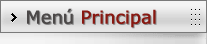
<style>
.page{position:relative;width:207px;height:44px}
.page>*{position:absolute;margin:0}
.t1{font:18px "Verdana";letter-spacing:-0.025em;color:#881811;font-weight:bold}
.t2{font:18px "Verdana";letter-spacing:-0.025em;color:#4b4848;font-weight:bold}
.t3{font:18px "Verdana";letter-spacing:-0.025em;font-weight:bold}
</style>
<div class="page">
<p class="t1" style="left:27px;top:8px;width:129px;height:20px"><span class="t2">Menú </span>Principal</p>
<p class="t3" style="left:28px;top:9px;width:129px;height:20px">Menú Principal</p>
</div>
